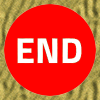
<style>
.page{position:relative;width:100px;height:100px;background:#ff0200}
.page>*{position:absolute;margin:0}
.t1{font:36px "TitilliumWeb-Bold";color:#ffffff}
</style>
<div class="page">
<p class="t1" style="left:17px;top:38px;width:65px;height:25px">END</p>
</div>
